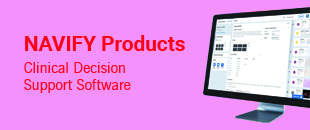
<style>
.page{position:relative;width:310px;height:130px;background:#f591fd}
.page>*{position:absolute;margin:0}
.t1{font:20.8px "Roboto-Bold";color:#ff0115}
.t2{font:14.6px "NewsGothicBT-Roman";color:#ff0115}
</style>
<div class="page">
<p class="t1" style="left:25px;top:35px;width:160px;height:16px">NAVIFY Products</p>
<p class="t2" style="left:24px;top:62px;width:107px;height:31px">Clinical Decision<br>Support Software</p>
</div>
